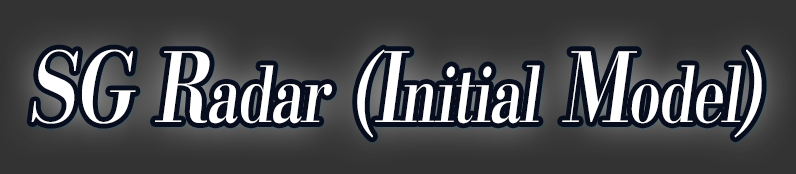
<style>
.page{position:relative;width:796px;height:174px;background:#333333}
.page>*{position:absolute;margin:0}
.t1{font:76.8px "KochoStd-Heavy";letter-spacing:-0.02em;color:#ffffff;font-style:italic;scale:0.75 1}
.t2{font:96px "KochoStd-Heavy";letter-spacing:-0.02em;color:#ffffff;font-style:italic;scale:0.75 1}
</style>
<div class="page">
<p class="t1" style="left:31px;top:49px;width:731px;height:89px"><span class="t2">SG R</span>adar<span class="t2"> (I</span>nitial<span class="t2"> M</span>odel<span class="t2">)</span></p>
</div>
